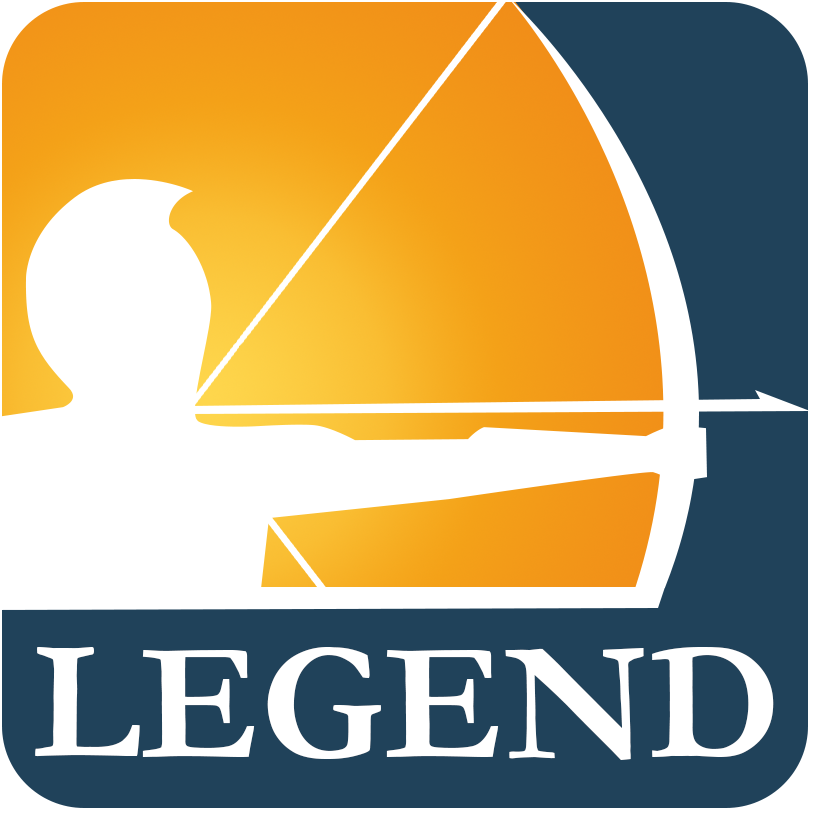
<style>
.page{position:relative;width:816px;height:816px;background:#20425a}
.page>*{position:absolute;margin:0}
.t1{font:170px "Garamond-Bold";color:#ffffff}
</style>
<div class="page">
<p class="t1" style="left:35px;top:647px;width:739px;height:113px">LEGEND</p>
</div>
